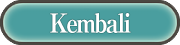
<style>
.page{position:relative;width:180px;height:45px;background:#4a9e9f}
.page>*{position:absolute;margin:0}
.t1{font:26px "RyuminPro-ExBold";letter-spacing:-0.08em;color:#ffffff;scale:0.9 1}
</style>
<div class="page">
<p class="t1" style="left:50px;top:13px;width:81px;height:20px">Kembali</p>
</div>
